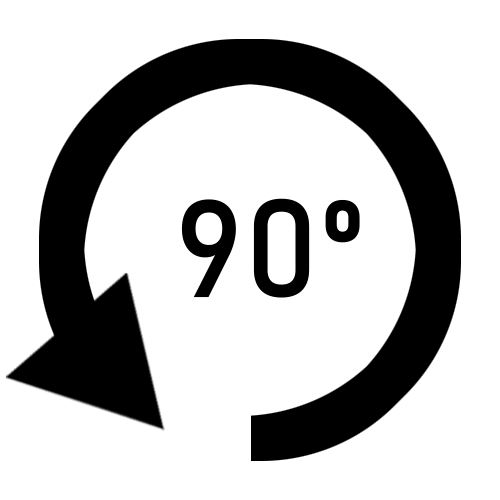
<style>
.page{position:relative;width:500px;height:500px;background:#ffffff}
.page>*{position:absolute;margin:0}
.t1{font:136.1px "Bahnschrift";color:#000000}
</style>
<div class="page">
<p class="t1" style="left:181px;top:198px;width:179px;height:100px">90º</p>
</div>
